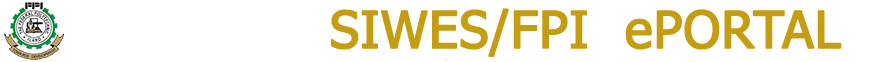
<style>
.page{position:relative;width:872px;height:62px;background:#ffffff}
.page>*{position:absolute;margin:0}
.t1{font:51px "Tahoma";color:#c59d10;font-weight:bold}
</style>
<div class="page">
<p class="t1" style="left:331px;top:8px;width:511px;height:49px">SIWES/FPI  ePORTAL</p>
</div>
